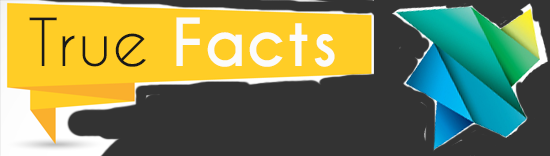
<style>
.page{position:relative;width:550px;height:156px;background:#333333}
.page>*{position:absolute;margin:0}
.t1{font:62px "CaviarDreams-Bold";letter-spacing:0.02em;color:#fbfbfb}
.t2{font:62px "CaviarDreams";letter-spacing:0.02em;color:#191919}
</style>
<div class="page">
<p class="t1" style="left:29px;top:17px;width:306px;height:50px"><span class="t2">True </span>Facts</p>
</div>
